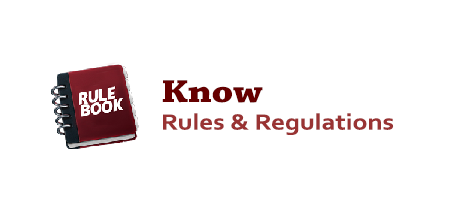
<style>
.page{position:relative;width:450px;height:212px;background:#ffffff}
.page>*{position:absolute;margin:0}
.t1{font:23px "Corbel-Bold";color:#993333;scale:1.18 1}
.t2{font:33.3px "ChaparralPro-Bold";color:#660000;scale:1.18 1}
</style>
<div class="page">
<p class="t1" style="left:162px;top:80px;width:232px;height:55px"><span class="t2">Know<br></span>Rules &amp; Regulations</p>
</div>
